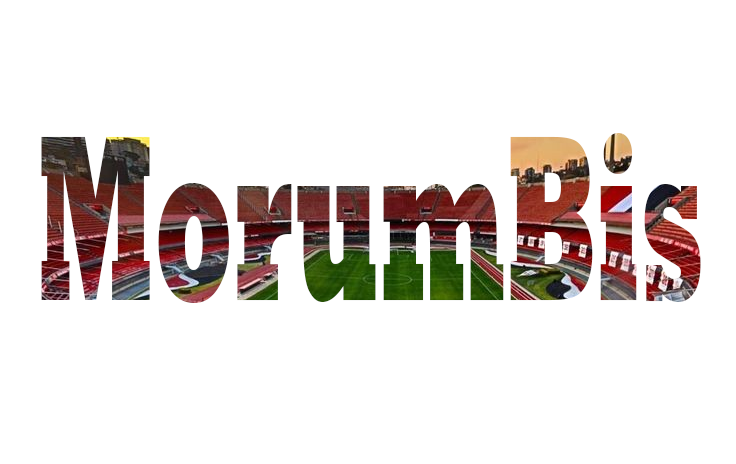
<style>
.page{position:relative;width:736px;height:464px;background:#ffffff}
.page>*{position:absolute;margin:0}
.t1{font:240.5px "Rockwell-ExtraBold";scale:0.44 1}
</style>
<div class="page">
<p class="t1" style="left:41px;top:132px;width:660px;height:171px">MorumBis</p>
</div>
